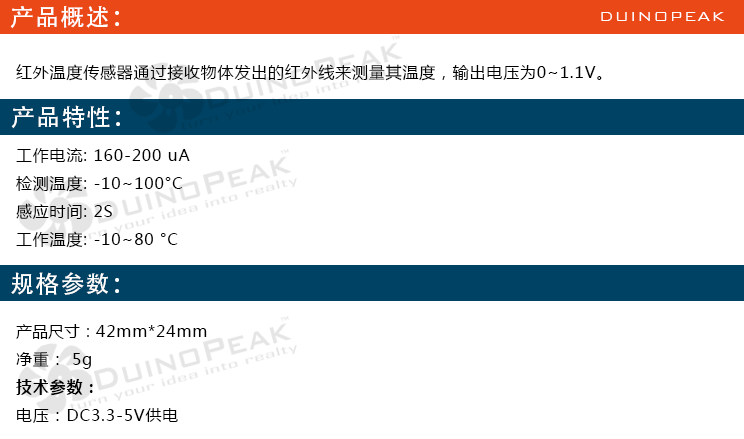
<style>
.page{position:relative;width:744px;height:439px;background:#ffffff}
.page>*{position:absolute;margin:0}
.t1{font:24px "AdobeHeitiStd-Regular";letter-spacing:0.05em;color:#ffffff}
.t2{font:18px "BankGothicBT-Light";letter-spacing:0.05em;color:#ffffff}
.t3{font:16px "MicrosoftYaHei";letter-spacing:0.05em;color:#000000}
.t4{font:16px "MicrosoftYaHei";color:#000000}
.t5{font:16px "MicrosoftYaHei-Bold";letter-spacing:0.05em;color:#000000}
</style>
<div class="page">
<p class="t1" style="left:10px;top:6px;width:109px;height:23px">产品概述：</p>
<p class="t2" style="left:601px;top:12px;width:124px;height:9px">DUINOPEAK</p>
<p class="t3" style="left:16px;top:64px;width:586px;height:17px">红外温度传感器通过接收物体发出的红外线来测量其温度，输出电压为0~1.1V。</p>
<p class="t1" style="left:11px;top:105px;width:109px;height:24px">产品特性：</p>
<p class="t3" style="left:16px;top:148px;width:174px;height:100px">工作电流: 160-200 uA<br>检测温度: -10~100°C<br>感应时间: 2S<br>工作温度: -10~80 °C</p>
<p class="t1" style="left:11px;top:272px;width:108px;height:23px">规格参数：</p>
<p class="t3" style="left:16px;top:324px;width:191px;height:99px"><span class="t4">产品尺寸：</span>42mm*24mm<br>净重： 5g<br><span class="t5">技术参数：<br></span>电压：DC3.3-5V供电</p>
</div>
